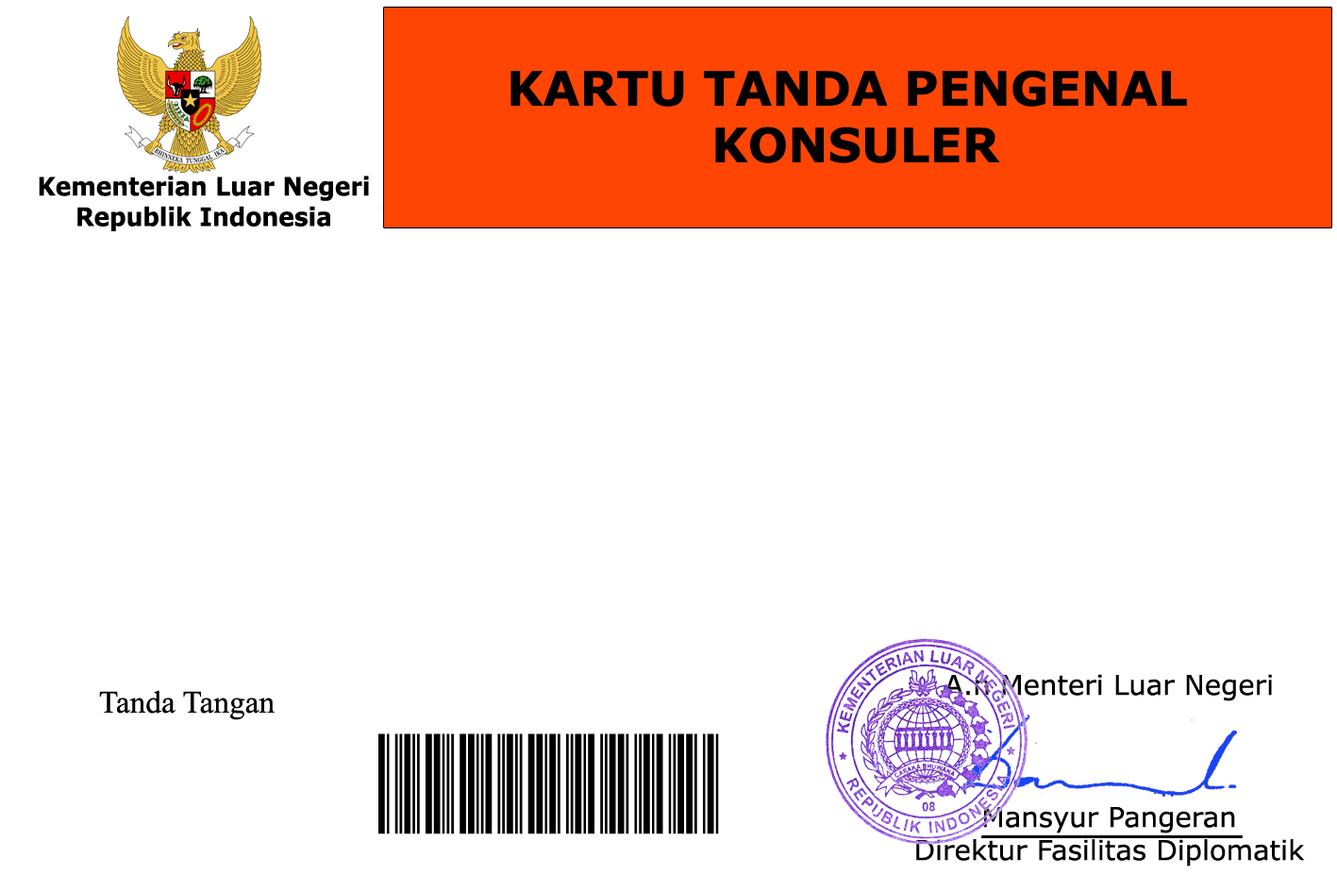
<style>
.page{position:relative;width:1337px;height:892px;background:#ffffff}
.page>*{position:absolute;margin:0}
.t1{font:47.2px "Verdana-Bold";color:#010101}
.t2{font:25.4px "Verdana-Bold";color:#000000;scale:0.93 1}
.t3{font:27.5px "Verdana";color:#000000}
.t4{font:31.5px "TimesNewRomanPSMT";color:#000000}
.t5{font:132.9px "Free3of9";color:#000000;scale:0.67 1}
</style>
<div class="page">
<p class="t1" style="left:511px;top:70px;width:676px;height:93px;text-align:center">KARTU TANDA PENGENAL <br>KONSULER</p>
<p class="t2" style="left:39px;top:176px;width:330px;height:55px;text-align:center">Kementerian Luar Negeri<br>Republik Indonesia</p>
<p class="t3" style="left:916px;top:674px;width:389px;height:192px;text-align:center">A.n Menteri Luar Negeri<br><br><br><br>Mansyur Pangeran<br>Direktur Fasilitas Diplomatik</p>
<p class="t4" style="left:99px;top:690px;width:176px;height:30px">Tanda Tangan</p>
<p class="t5" style="left:378px;top:733px;width:341px;height:101px">1002012128</p>
</div>
